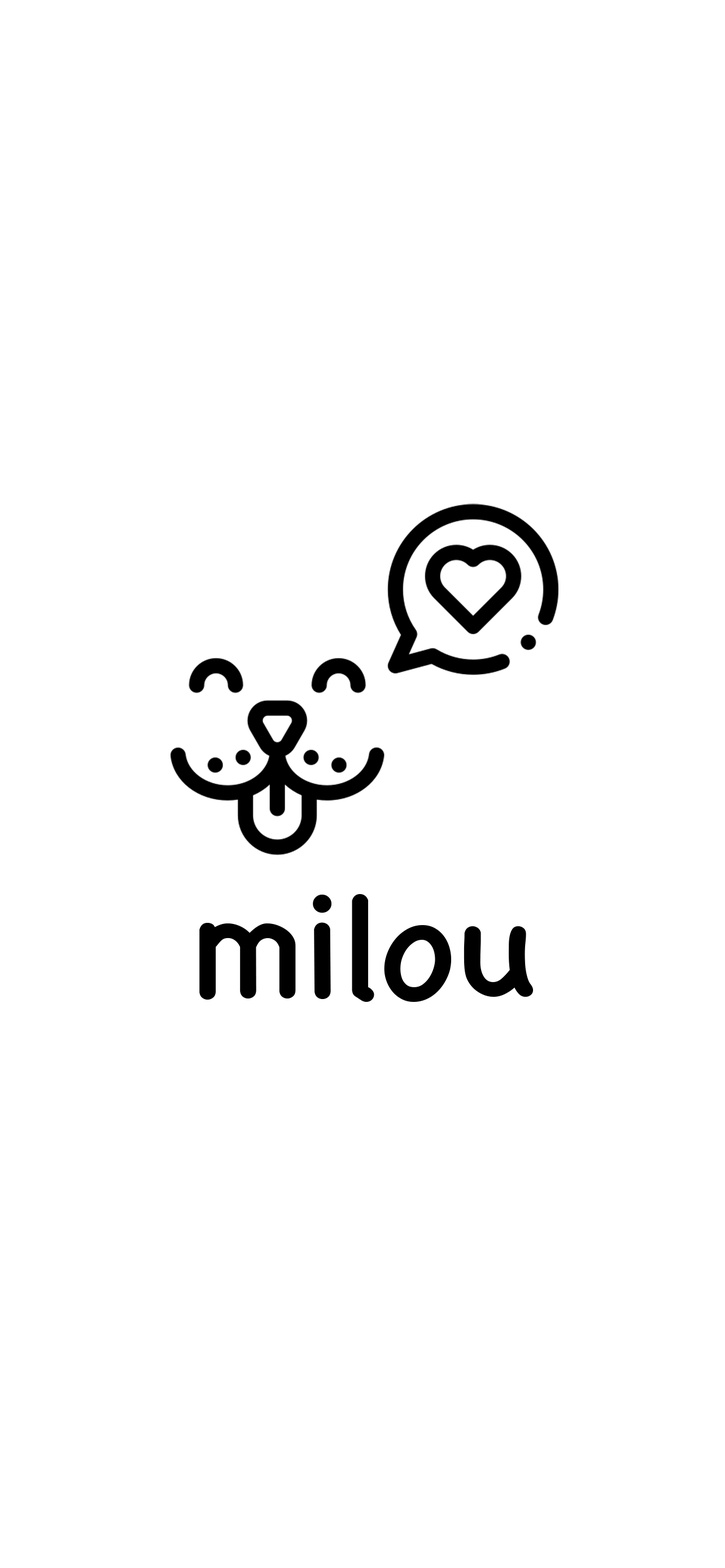
<style>
.page{position:relative;width:725px;height:1568px;background:#ffffff}
.page>*{position:absolute;margin:0}
.t1{font:148.2px "ChalkboardSE-Regular";color:#000000}
</style>
<div class="page">
<p class="t1" style="left:199px;top:894px;width:334px;height:108px">milou</p>
</div>
